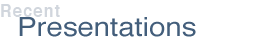
<style>
.page{position:relative;width:280px;height:45px;background:#ffffff}
.page>*{position:absolute;margin:0}
.t1{font:17.6px "Helvetica-Bold";letter-spacing:0.085em;color:#d1d6dd;scale:0.91 1}
.t2{font:26.4px "Helvetica";color:#435e7b;scale:1.11 1}
</style>
<div class="page">
<p class="t1" style="left:1px;top:4px;width:59px;height:13px">Recent</p>
<p class="t2" style="left:19px;top:17px;width:177px;height:20px">Presentations</p>
</div>
